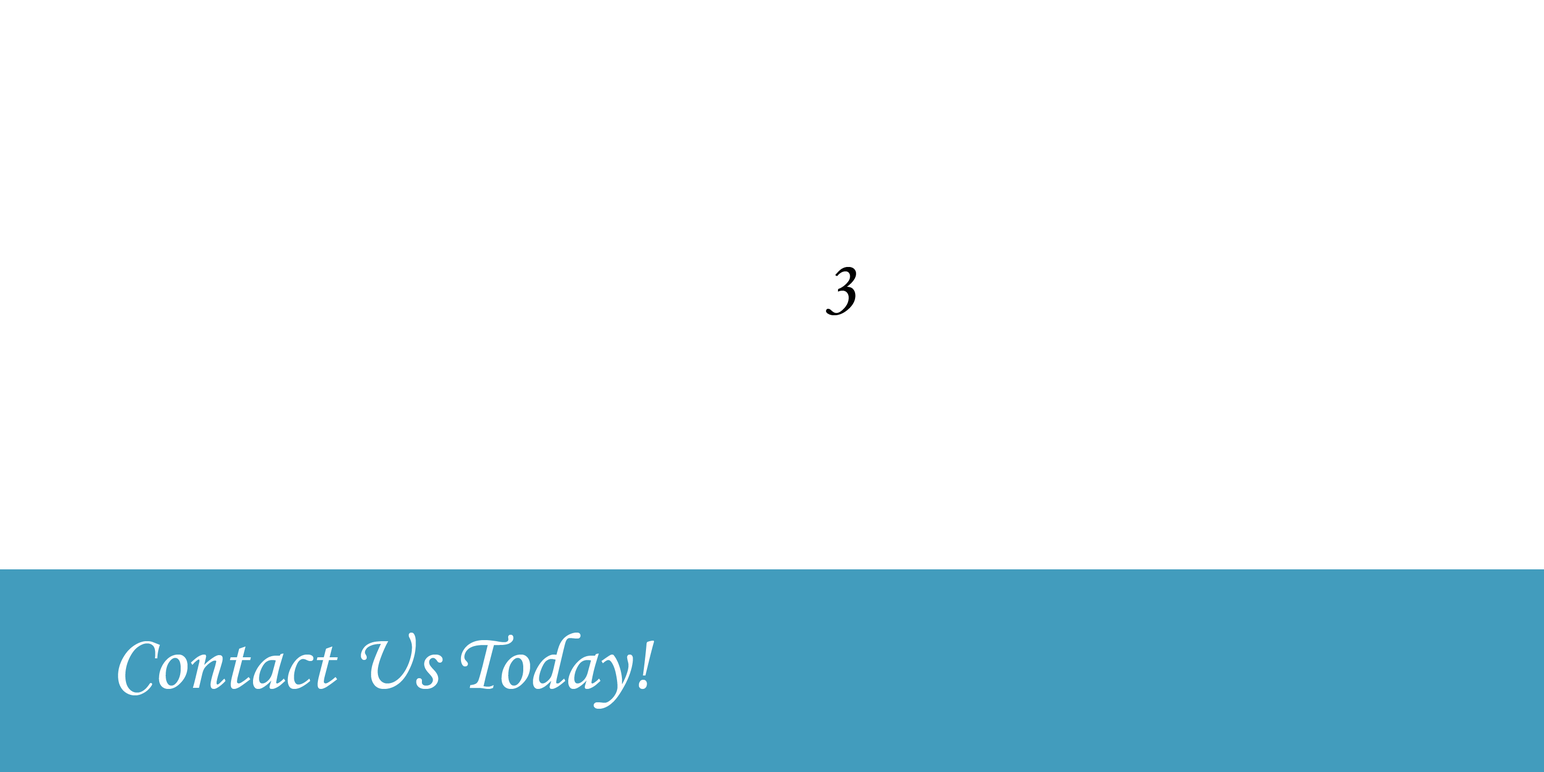
<style>
.page{position:relative;width:1544px;height:772px;background:#ffffff}
.page>*{position:absolute;margin:0}
.t1{font:80.4px "MonotypeCorsiva";color:#010101}
.t2{font:80.4px "MonotypeCorsiva";color:#ffffff}
</style>
<div class="page">
<p class="t1" style="left:826px;top:267px;width:30px;height:48px">3</p>
<p class="t2" style="left:118px;top:633px;width:536px;height:76px">Contact Us Today!</p>
</div>
